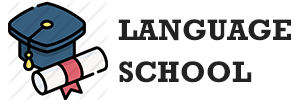
<style>
.page{position:relative;width:300px;height:100px;background:#ffffff}
.page>*{position:absolute;margin:0}
.t1{font:30px "Rockwell-Bold";color:#222222}
.t2{font:30px "Rockwell-Bold";color:#ffffff}
</style>
<div class="page">
<p class="t1" style="left:118px;top:19px;width:173px;height:22px">LANGUAGE</p>
<p class="t1" style="left:119px;top:61px;width:133px;height:22px"><span class="t2"><br><br></span>SCHOOL</p>
</div>
